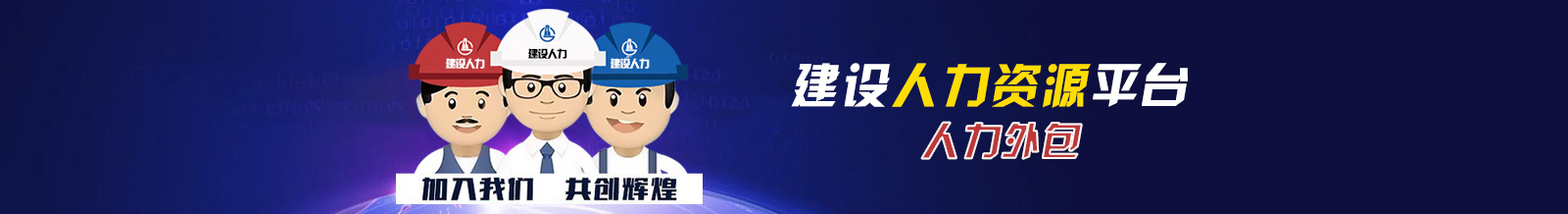
<style>
.page{position:relative;width:1568px;height:214px;background:#0e0f3f}
.page>*{position:absolute;margin:0}
.t1{font:10.5px "JLinXin";letter-spacing:-0.08em;color:#010101}
.t2{font:10.5px "JLinXin";letter-spacing:-0.08em;color:#fbf9fb}
.t3{font:47.7px "JLinXin";letter-spacing:0.06em;color:#fedd02}
.t4{font:47.7px "JLinXin";letter-spacing:0.06em;color:#fffffe}
.t5{font:39.2px "JLinXin";letter-spacing:0.02em;color:#be3839;font-style:italic}
</style>
<div class="page">
<p class="t1" style="left:528px;top:48px;width:39px;height:11px">建设人力</p>
<p class="t2" style="left:446px;top:58px;width:39px;height:11px">建设人力</p>
<p class="t2" style="left:611px;top:58px;width:39px;height:11px">建设人力</p>
<p class="t3" style="left:791px;top:63px;width:397px;height:45px"><span class="t4">建设</span>人力资源<span class="t4">平台</span></p>
<p class="t5" style="left:921px;top:122px;width:161px;height:37px">人力外包</p>
</div>
